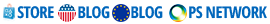
<style>
.page{position:relative;width:270px;height:24px;background:#ffffff}
.page>*{position:absolute;margin:0}
.t1{font:16.4px "OpenSans-CondensedBold";letter-spacing:-0.03em;color:#0066bb;text-transform:uppercase}
</style>
<div class="page">
<p class="t1" style="left:17px;top:6px;width:37px;height:13px">store</p>
<p class="t1" style="left:78px;top:6px;width:32px;height:13px">blog</p>
<p class="t1" style="left:131px;top:6px;width:32px;height:13px">blog</p>
<p class="t1" style="left:189px;top:6px;width:78px;height:13px">ps network</p>
</div>
